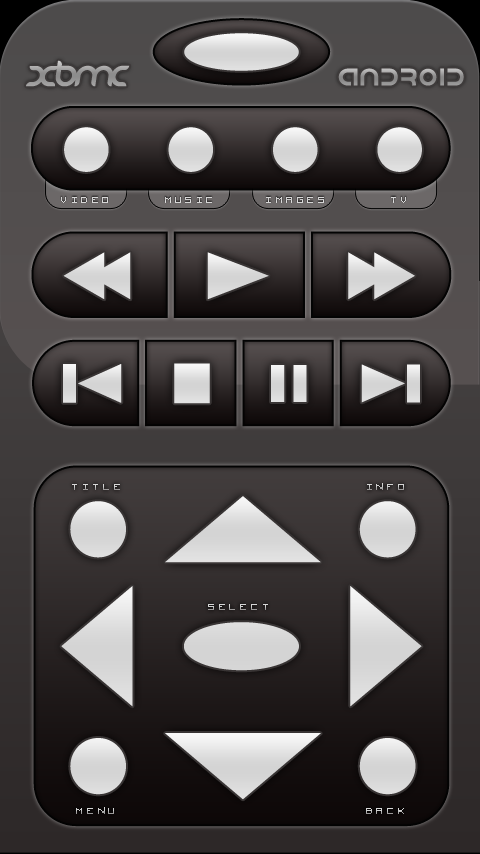
<style>
.page{position:relative;width:480px;height:854px}
.page>*{position:absolute;margin:0}
.t1{font:16px "VisitorTT2BRK";letter-spacing:0.2em;color:#d6d6d6}
.t2{font:16px "VisitorTT2BRK";letter-spacing:0.2em;color:#d8d8d8}
.t3{font:16px "VisitorTT2BRK";letter-spacing:0.2em}
.t4{font:16px "VisitorTT2BRK";letter-spacing:0.2em;color:#cfcfcf}
</style>
<div class="page">
<p class="t1" style="left:61px;top:197px;width:47px;height:6px">VIDEO</p>
<p class="t1" style="left:165px;top:197px;width:47px;height:6px">MUSIC</p>
<p class="t1" style="left:266px;top:197px;width:58px;height:6px">IMAGES</p>
<p class="t2" style="left:391px;top:197px;width:15px;height:6px">TV</p>
<p class="t3" style="left:72px;top:484px;width:48px;height:6px">TITLE</p>
<p class="t3" style="left:367px;top:483px;width:37px;height:7px">INFO</p>
<p class="t3" style="left:208px;top:604px;width:60px;height:6px">SELECT</p>
<p class="t3" style="left:76px;top:807px;width:38px;height:7px">MENU</p>
<p class="t4" style="left:366px;top:808px;width:38px;height:6px">BACK</p>
</div>
